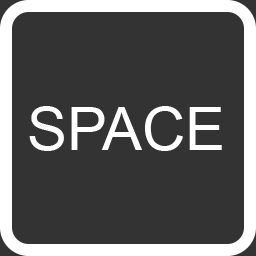
<style>
.page{position:relative;width:256px;height:256px;background:#333333}
.page>*{position:absolute;margin:0}
.t1{font:60px "ArialMT";color:#ffffff}
</style>
<div class="page">
<p class="t1" style="left:29px;top:106px;width:193px;height:45px">SPACE</p>
</div>
